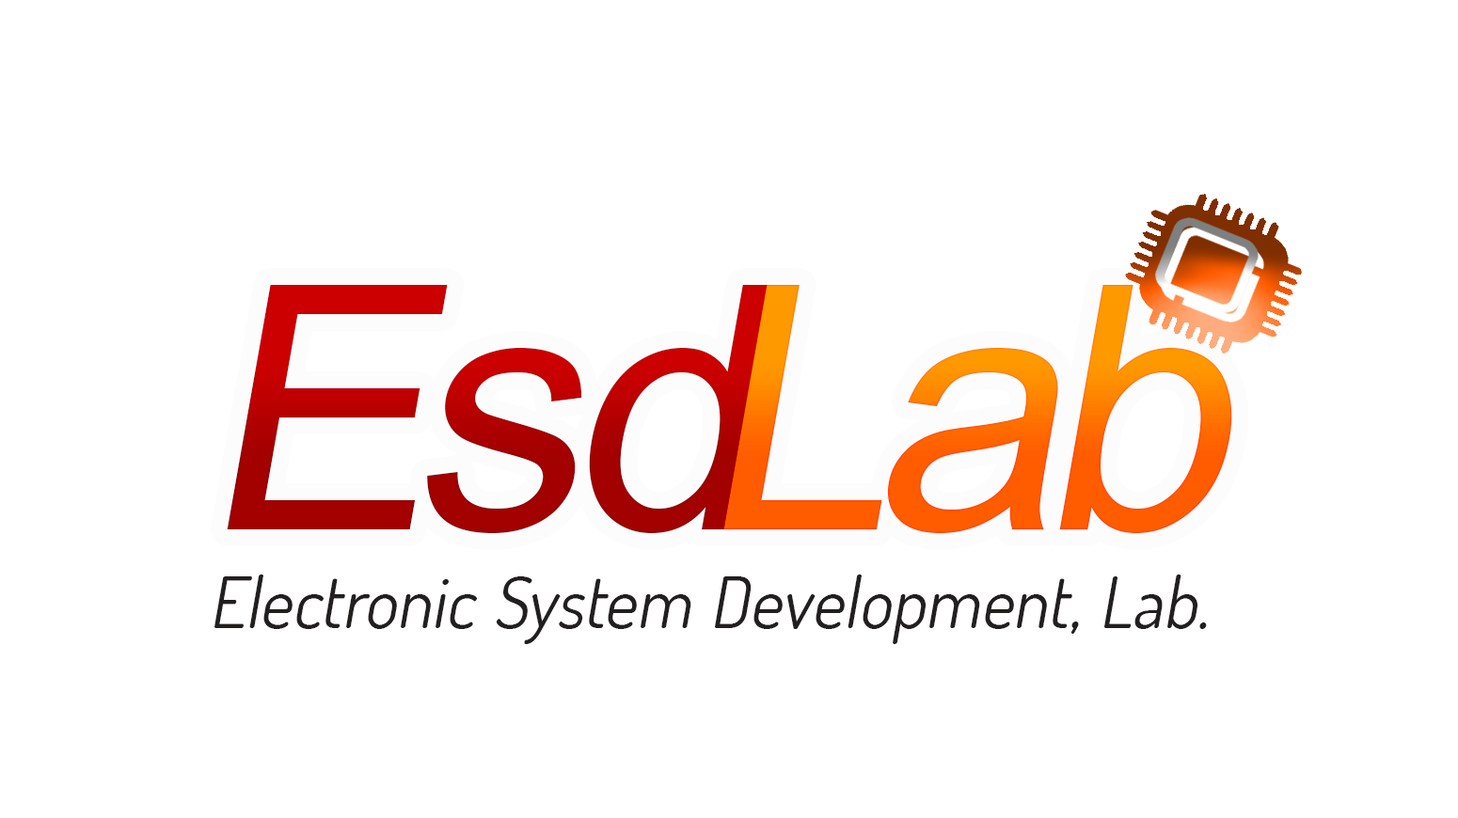
<style>
.page{position:relative;width:1458px;height:818px;background:#ffffff}
.page>*{position:absolute;margin:0}
.t1{font:340.9px "ArialMT";font-style:italic}
.t2{font:70.5px "Dosis-Book";color:#221f1f;font-style:italic}
</style>
<div class="page">
<p class="t1" style="left:227px;top:285px;width:1005px;height:248px">EsdLab</p>
<p class="t2" style="left:214px;top:575px;width:992px;height:69px">Electronic System Development, Lab.</p>
</div>
